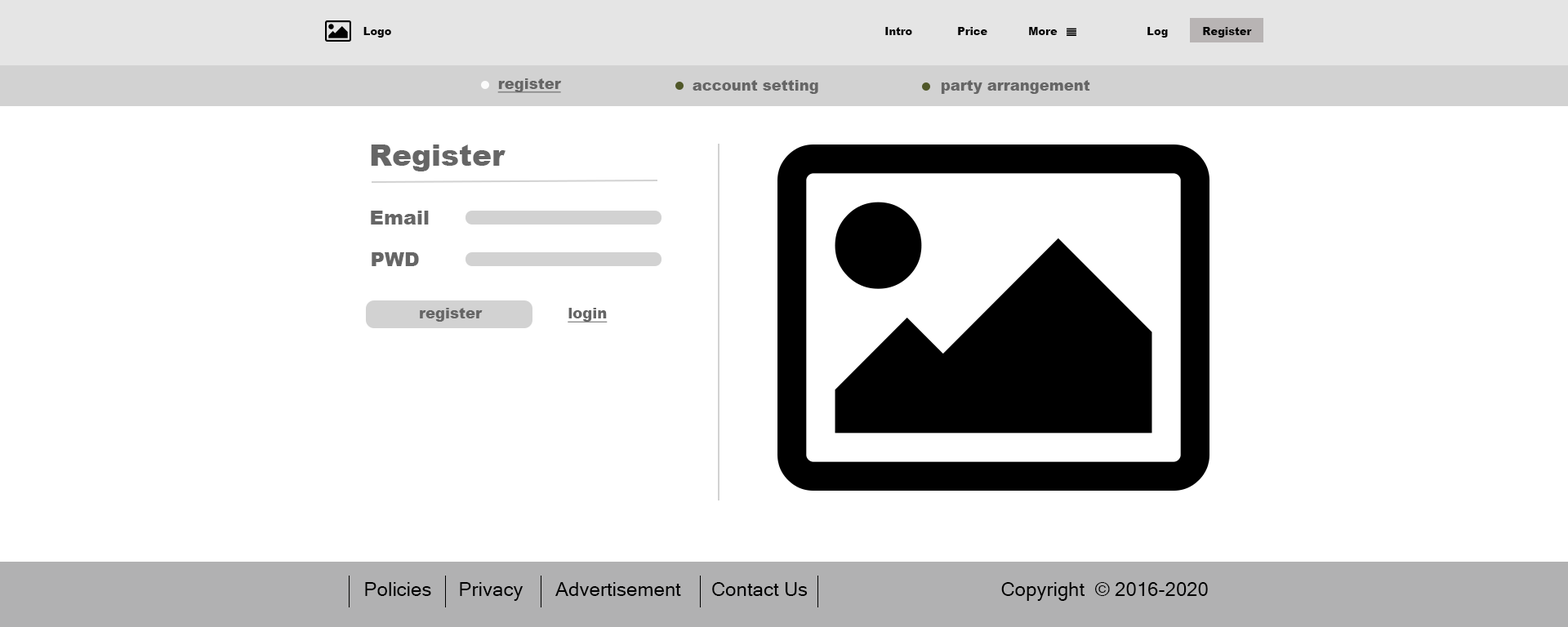
<style>
.page{position:relative;width:1568px;height:627px;background:#ffffff}
.page>*{position:absolute;margin:0}
.t1{font:10.6px "Arial-Black";color:#050505}
.t2{font:14.7px "Arial-Black";color:#666666;text-decoration:underline}
.t3{font:14.7px "Arial-Black";color:#666666}
.t4{font:29.4px "Arial-Black";color:#666666}
.t5{font:19.6px "Arial-Black";color:#666666}
.t6{font:19.6px "MicrosoftSansSerif";color:#000000}
</style>
<div class="page">
<p class="t1" style="left:363px;top:27px;width:28px;height:11px">Logo</p>
<p class="t1" style="left:885px;top:27px;width:27px;height:8px">Intro</p>
<p class="t1" style="left:958px;top:27px;width:29px;height:8px">Price</p>
<p class="t1" style="left:1029px;top:27px;width:29px;height:8px">More</p>
<p class="t1" style="left:1147px;top:27px;width:21px;height:11px">Log</p>
<p class="t1" style="left:1203px;top:27px;width:49px;height:11px">Register</p>
<p class="t2" style="left:497px;top:78px;width:65px;height:15px">register</p>
<p class="t3" style="left:693px;top:80px;width:125px;height:14px">account setting</p>
<p class="t3" style="left:941px;top:80px;width:149px;height:14px">party arrangement</p>
<p class="t4" style="left:371px;top:145px;width:135px;height:27px">Register</p>
<p class="t5" style="left:371px;top:211px;width:58px;height:14px">Email</p>
<p class="t5" style="left:372px;top:252px;width:47px;height:14px">PWD</p>
<p class="t3" style="left:420px;top:308px;width:63px;height:14px">register</p>
<p class="t2" style="left:568px;top:308px;width:40px;height:15px">login</p>
<p class="t6" style="left:365px;top:582px;width:66px;height:14px">Policies</p>
<p class="t6" style="left:460px;top:582px;width:63px;height:19px">Privacy</p>
<p class="t6" style="left:555px;top:582px;width:126px;height:14px">Advertisement</p>
<p class="t6" style="left:712px;top:582px;width:96px;height:14px">Contact Us</p>
<p class="t6" style="left:1001px;top:582px;width:207px;height:19px">Copyright  © 2016-2020</p>
</div>
